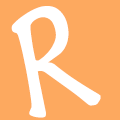
<style>
.page{position:relative;width:120px;height:120px;background:#fda95f}
.page>*{position:absolute;margin:0}
.t1{font:176px "Herculanum";color:#ffffff}
</style>
<div class="page">
<p class="t1" style="left:11px;top:6px;width:90px;height:112px;rotate:-12deg">R</p>
</div>
